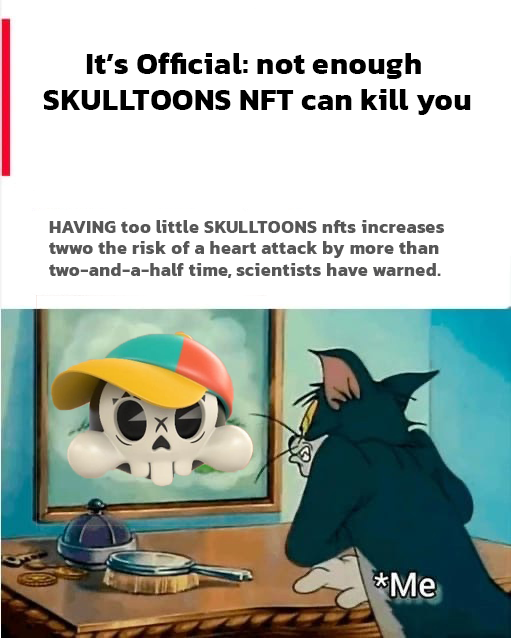
<style>
.page{position:relative;width:512px;height:638px;background:#ffffff}
.page>*{position:absolute;margin:0}
.t1{font:30px "Kanit-Bold";letter-spacing:0.025em;color:#000000}
.t2{font:18px "Kanit-Bold";letter-spacing:0.025em;color:#575757}
</style>
<div class="page">
<p class="t1" style="left:43px;top:52px;width:428px;height:63px;text-align:center">It’s Official: not enough<br> SKULLTOONS NFT can kill you</p>
<p class="t2" style="left:49px;top:220px;width:396px;height:58px">HAVING too little SKULLTOONS nfts increases twwo the risk of a heart attack by more than two-and-a-half time, scientists have warned.</p>
</div>
